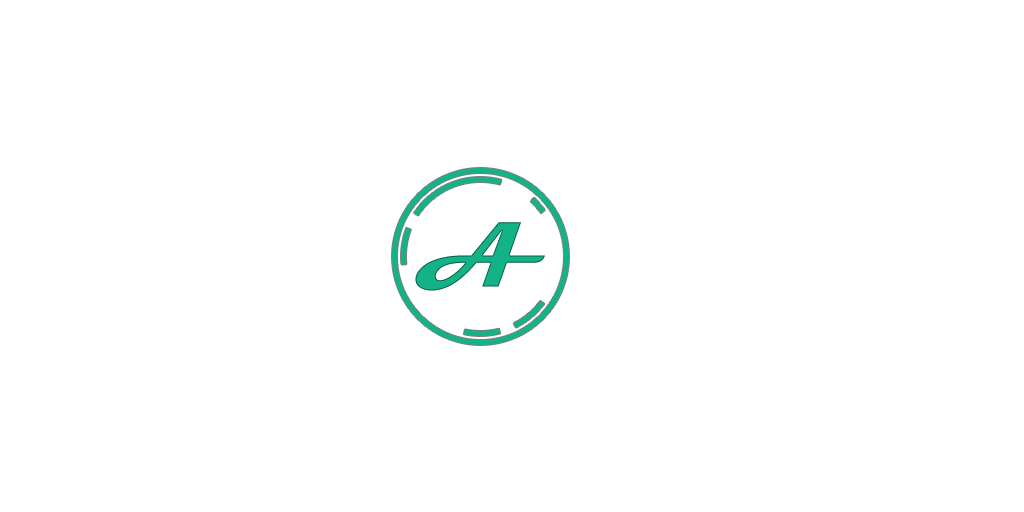
<style>
.page{position:relative;width:1024px;height:512px;background:#ffffff}
.page>*{position:absolute;margin:0}
.t1{font:93.5px "Magneto-Bold";color:#14b287}
</style>
<div class="page">
<p class="t1" style="left:415px;top:222px;width:130px;height:69px">A</p>
</div>
